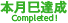
<style>
.page{position:relative;width:68px;height:23px;background:#ffffff}
.page>*{position:absolute;margin:0}
.t1{font:13px "GothicMB101Pr6N-Medium";color:#37b027;font-weight:bold}
</style>
<div class="page">
<p class="t1" style="left:0px;top:0px;width:67px;height:14px">本月已達成</p>
</div>
